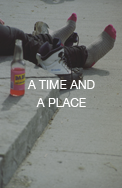
<style>
.page{position:relative;width:122px;height:188px}
.page>*{position:absolute;margin:0}
.t1{font:12px/18px "HelveticaNeue";color:#fefefe}
</style>
<div class="page">
<p class="t1" style="left:27px;top:80px;width:68px;height:27px;text-align:center">A TIME AND <br>A PLACE</p>
</div>
